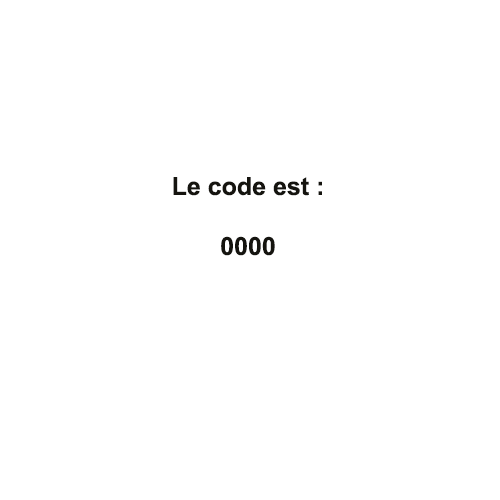
<style>
.page{position:relative;width:500px;height:500px;background:#ffffff}
.page>*{position:absolute;margin:0}
.t1{font:25px "Arial-BoldMT";color:#15140f}
</style>
<div class="page">
<p class="t1" style="left:173px;top:177px;width:149px;height:79px;text-align:center">Le code est :<br><br>0000</p>
</div>
